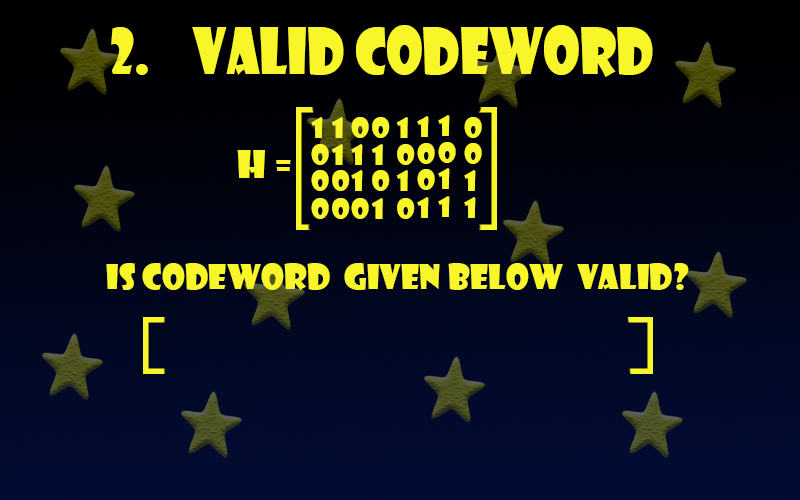
<style>
.page{position:relative;width:800px;height:500px}
.page>*{position:absolute;margin:0}
.t1{font:62.1px "ShowcardGothic-Reg";color:#f8f628;scale:0.85 1}
.t2{font:27.4px "ShowcardGothic-Reg";color:#f8f628;scale:1.14 1}
.t3{font:37.5px "ShowcardGothic-Reg";color:#f8f628}
.t4{font:33.3px "ShowcardGothic-Reg";color:#f8f628}
</style>
<div class="page">
<p class="t1" style="left:111px;top:25px;width:542px;height:52px">2.    valid codeword</p>
<p class="t2" style="left:311px;top:117px;width:12px;height:21px">1</p>
<p class="t2" style="left:331px;top:117px;width:12px;height:21px">1</p>
<p class="t2" style="left:351px;top:117px;width:18px;height:21px">0</p>
<p class="t2" style="left:372px;top:117px;width:18px;height:21px">0</p>
<p class="t2" style="left:396px;top:117px;width:12px;height:21px">1</p>
<p class="t2" style="left:417px;top:116px;width:12px;height:21px">1</p>
<p class="t2" style="left:438px;top:115px;width:12px;height:21px">1</p>
<p class="t2" style="left:464px;top:117px;width:18px;height:21px">0</p>
<p class="t3" style="left:237px;top:150px;width:54px;height:28px">H =</p>
<p class="t2" style="left:311px;top:144px;width:18px;height:21px">0</p>
<p class="t2" style="left:331px;top:144px;width:12px;height:21px">1</p>
<p class="t2" style="left:351px;top:144px;width:12px;height:21px">1</p>
<p class="t2" style="left:371px;top:144px;width:12px;height:21px">1</p>
<p class="t2" style="left:397px;top:144px;width:18px;height:21px">0</p>
<p class="t2" style="left:417px;top:143px;width:18px;height:21px">0</p>
<p class="t2" style="left:438px;top:142px;width:18px;height:21px">0</p>
<p class="t2" style="left:464px;top:143px;width:18px;height:21px">0</p>
<p class="t2" style="left:311px;top:170px;width:18px;height:21px">0</p>
<p class="t2" style="left:332px;top:170px;width:18px;height:21px">0</p>
<p class="t2" style="left:351px;top:170px;width:12px;height:21px">1</p>
<p class="t2" style="left:372px;top:170px;width:18px;height:21px">0</p>
<p class="t2" style="left:396px;top:170px;width:12px;height:21px">1</p>
<p class="t2" style="left:417px;top:169px;width:18px;height:21px">0</p>
<p class="t2" style="left:438px;top:168px;width:12px;height:21px">1</p>
<p class="t2" style="left:464px;top:170px;width:12px;height:21px">1</p>
<p class="t2" style="left:311px;top:198px;width:18px;height:21px">0</p>
<p class="t2" style="left:332px;top:198px;width:18px;height:21px">0</p>
<p class="t2" style="left:351px;top:198px;width:18px;height:21px">0</p>
<p class="t2" style="left:371px;top:198px;width:12px;height:21px">1</p>
<p class="t2" style="left:397px;top:198px;width:18px;height:21px">0</p>
<p class="t2" style="left:417px;top:197px;width:12px;height:21px">1</p>
<p class="t2" style="left:438px;top:196px;width:12px;height:21px">1</p>
<p class="t2" style="left:464px;top:197px;width:12px;height:21px">1</p>
<p class="t4" style="left:106px;top:263px;width:583px;height:27px">is codeword  given below  valid?</p>
</div>
